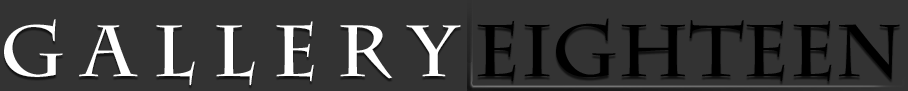
<style>
.page{position:relative;width:908px;height:91px;background:#333333}
.page>*{position:absolute;margin:0}
.t1{font:72px "CharlemagneStd-Bold";color:#ffffff}
.t2{font:73px "CharlemagneStd-Bold";color:#000000}
</style>
<div class="page">
<p class="t1" style="left:4px;top:18px;width:896px;height:68px">G a l l e r y <span class="t2">Eighteen</span></p>
</div>
